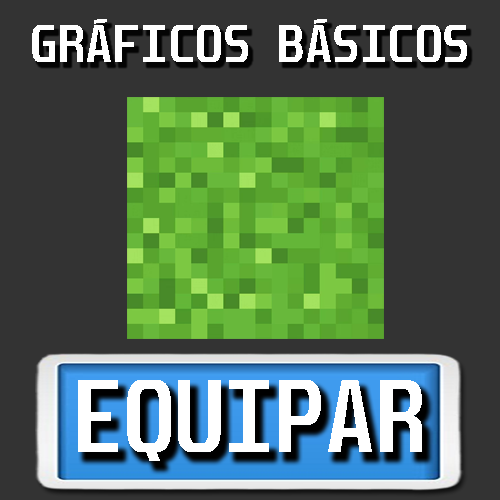
<style>
.page{position:relative;width:500px;height:500px;background:#333333}
.page>*{position:absolute;margin:0}
.t1{font:45px "Unispace-Bold";color:#ffffff}
.t2{font:88.1px "Unispace-Bold";color:#ffffff;scale:0.94 1}
.t3{font:87.7px "Unispace-Bold";color:#ffffff;scale:0.94 1}
</style>
<div class="page">
<p class="t1" style="left:32px;top:19px;width:435px;height:43px">GRÁFICOS BÁSICOS</p>
<p class="t2" style="left:78px;top:380px;width:344px;height:81px">EQUIPA<span class="t3">R</span></p>
</div>
